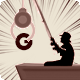
<style>
.page{position:relative;width:80px;height:80px;background:#ece4d3}
.page>*{position:absolute;margin:0}
.t1{font:24px "Generica-Bold";color:#2f0000}
</style>
<div class="page">
<p class="t1" style="left:15px;top:33px;width:18px;height:18px">G</p>
</div>
